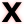
<style>
.page{position:relative;width:24px;height:24px;background:#000000}
.page>*{position:absolute;margin:0}
.t1{font:27px "Verdana-Bold";color:#000000}
</style>
<div class="page">
<p class="t1" style="left:1px;top:2px;width:21px;height:20px">X</p>
</div>
